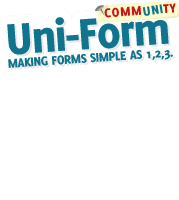
<style>
.page{position:relative;width:179px;height:200px;background:#ffffff}
.page>*{position:absolute;margin:0}
.t1{font:14px "Delicious-Heavy";letter-spacing:0.05em;color:#cf1313;text-transform:uppercase}
.t2{font:14px "Delicious-Heavy";letter-spacing:0.05em;color:#fbfccc;text-transform:uppercase}
.t3{font:14px "Delicious-Heavy";letter-spacing:0.05em;color:#11748f;text-transform:uppercase}
.t4{font:48px "Delicious-Heavy";letter-spacing:-0.025em;color:#11748f}
.t5{font:13.8px "Delicious-Heavy";letter-spacing:-0.025em;color:#11748f;text-transform:uppercase}
</style>
<div class="page">
<p class="t1" style="left:104px;top:3px;width:72px;height:15px;rotate:-4deg">Comm<span class="t2">uni</span>ty</p>
<p class="t3" style="left:142px;top:4px;width:21px;height:12px;rotate:-9deg">uni</p>
<p class="t4" style="left:7px;top:17px;width:162px;height:38px;rotate:-4deg">Uni-Form</p>
<p class="t5" style="left:8px;top:50px;width:165px;height:18px;rotate:-4deg">Making forms simple as 1,2,3.</p>
</div>
